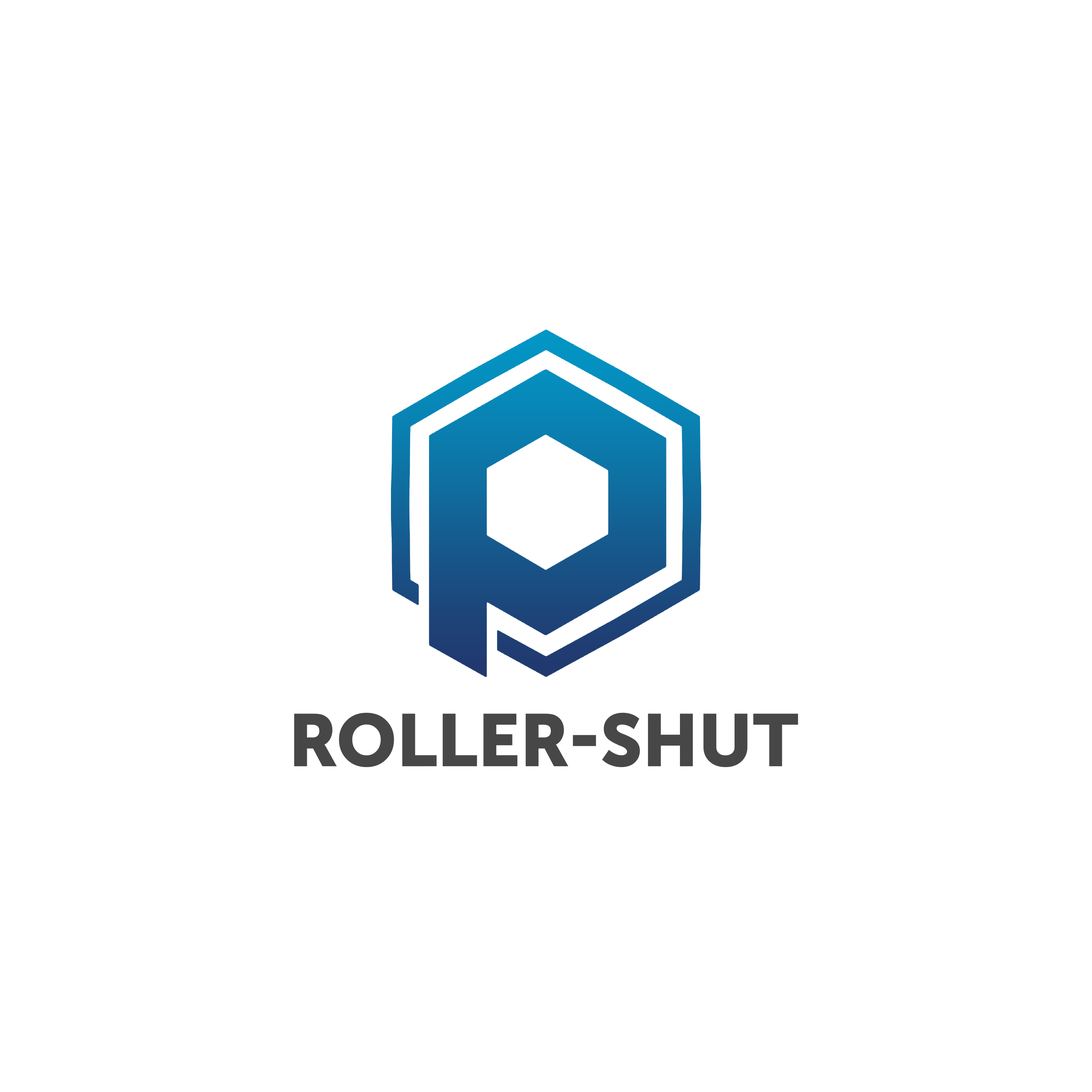
<style>
.page{position:relative;width:1092px;height:1092px;background:#ffffff}
.page>*{position:absolute;margin:0}
.t1{font:73.5px "MuseoSansCyrl-900";color:#474747;text-transform:uppercase}
</style>
<div class="page">
<p class="t1" style="left:294px;top:713px;width:504px;height:54px">rolleR-shut</p>
</div>
